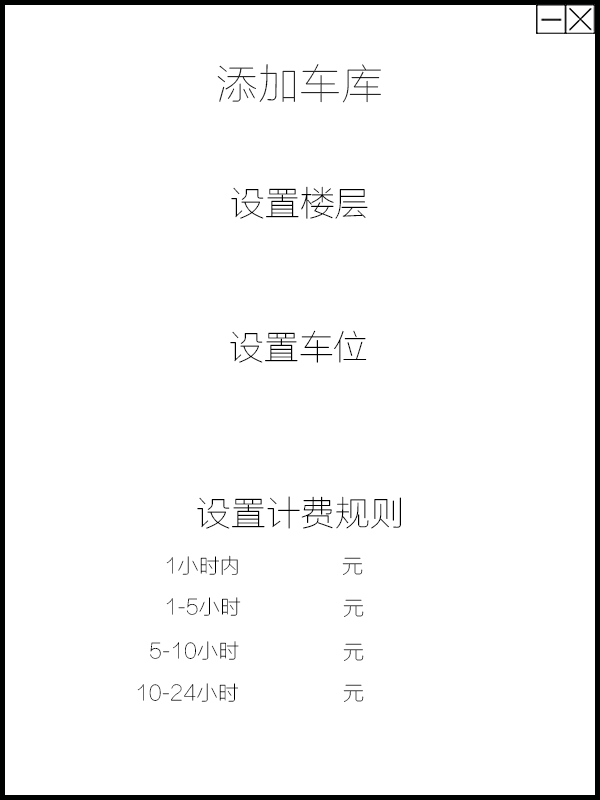
<style>
.page{position:relative;width:600px;height:800px;background:#ffffff}
.page>*{position:absolute;margin:0}
.t1{font:41.7px "FZLTCXHJW--GB1-0";color:#000000}
.t2{font:34.8px "FZLTCXHJW--GB1-0";color:#000000}
.t3{font:20.9px "FZLTCXHJW--GB1-0";color:#000000}
.t4{font:20.9px "FZLTCXHJW--GB1-0"}
</style>
<div class="page">
<p class="t1" style="left:217px;top:64px;width:164px;height:39px">添加车库</p>
<p class="t2" style="left:231px;top:186px;width:137px;height:33px">设置楼层</p>
<p class="t2" style="left:230px;top:330px;width:137px;height:33px">设置车位</p>
<p class="t2" style="left:197px;top:496px;width:204px;height:33px">设置计费规则</p>
<p class="t3" style="left:166px;top:555px;width:72px;height:20px">1小时内</p>
<p class="t4" style="left:342px;top:557px;width:21px;height:18px">元</p>
<p class="t3" style="left:166px;top:597px;width:75px;height:19px">1-5小时</p>
<p class="t4" style="left:343px;top:599px;width:21px;height:18px">元</p>
<p class="t3" style="left:150px;top:641px;width:89px;height:19px">5-10小时</p>
<p class="t4" style="left:343px;top:643px;width:21px;height:18px">元</p>
<p class="t3" style="left:137px;top:683px;width:101px;height:19px">10-24小时</p>
<p class="t4" style="left:343px;top:684px;width:21px;height:18px">元</p>
</div>
